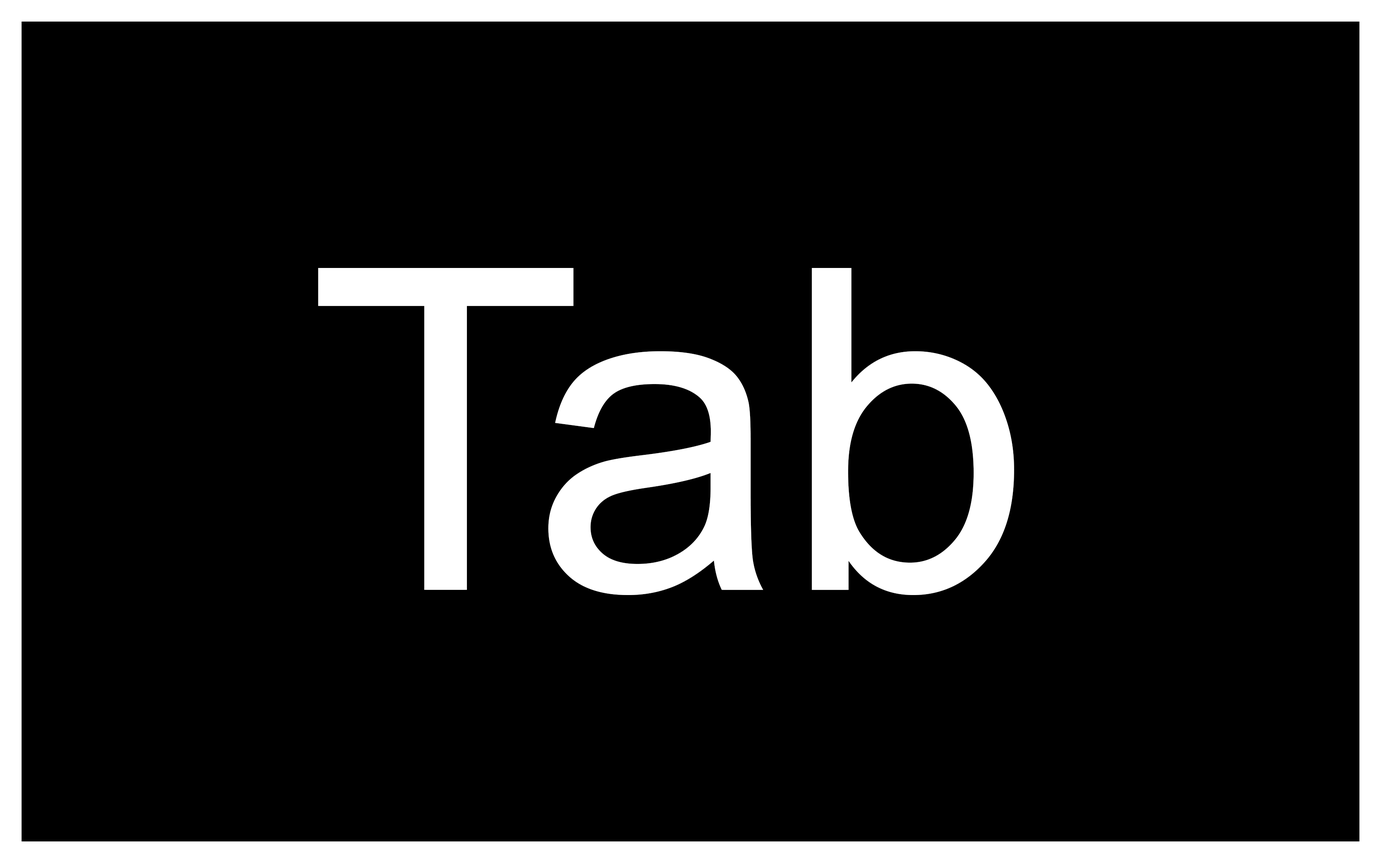
<style>
.page{position:relative;width:1381px;height:863px;background:#000000}
.page>*{position:absolute;margin:0}
.t1{font:449.6px "ArialMT";color:#ffffff}
</style>
<div class="page">
<p class="t1" style="left:318px;top:268px;width:696px;height:327px">Tab</p>
</div>
